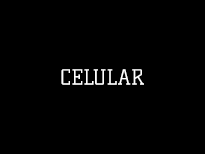
<style>
.page{position:relative;width:205px;height:154px;background:#000000}
.page>*{position:absolute;margin:0}
.t1{font:20.8px "KellySlab-Regular";color:#ffffff}
</style>
<div class="page">
<p class="t1" style="left:61px;top:69px;width:83px;height:16px">CELULAR</p>
</div>
